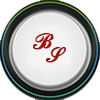
<style>
.page{position:relative;width:100px;height:100px}
.page>*{position:absolute;margin:0}
.t1{font:24px "CommercialScriptBT-Regular";color:#a01308;font-weight:bold}
</style>
<div class="page">
<p class="t1" style="left:33px;top:33px;width:21px;height:17px">B</p>
<p class="t1" style="left:46px;top:47px;width:20px;height:16px">S</p>
</div>
